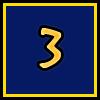
<style>
.page{position:relative;width:100px;height:100px;background:#061963}
.page>*{position:absolute;margin:0}
.t1{font:60px "Herculanum";font-weight:bold}
</style>
<div class="page">
<p class="t1" style="left:39px;top:28px;width:23px;height:40px">3</p>
</div>
